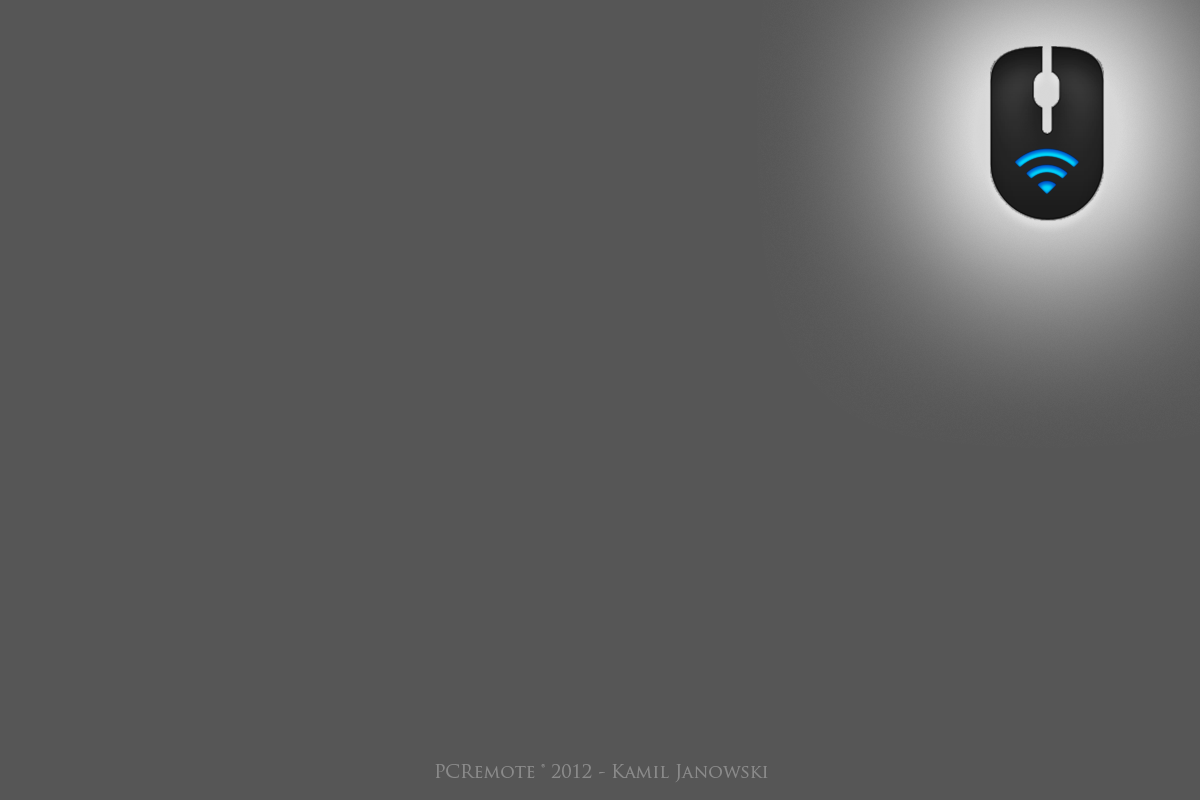
<style>
.page{position:relative;width:1200px;height:800px;background:#565656}
.page>*{position:absolute;margin:0}
.t1{font:18px "TrajanPro-Regular";color:#8a8a8a}
</style>
<div class="page">
<p class="t1" style="left:435px;top:764px;width:333px;height:19px">PCRemote ® 2012 - Kamil Janowski</p>
</div>
